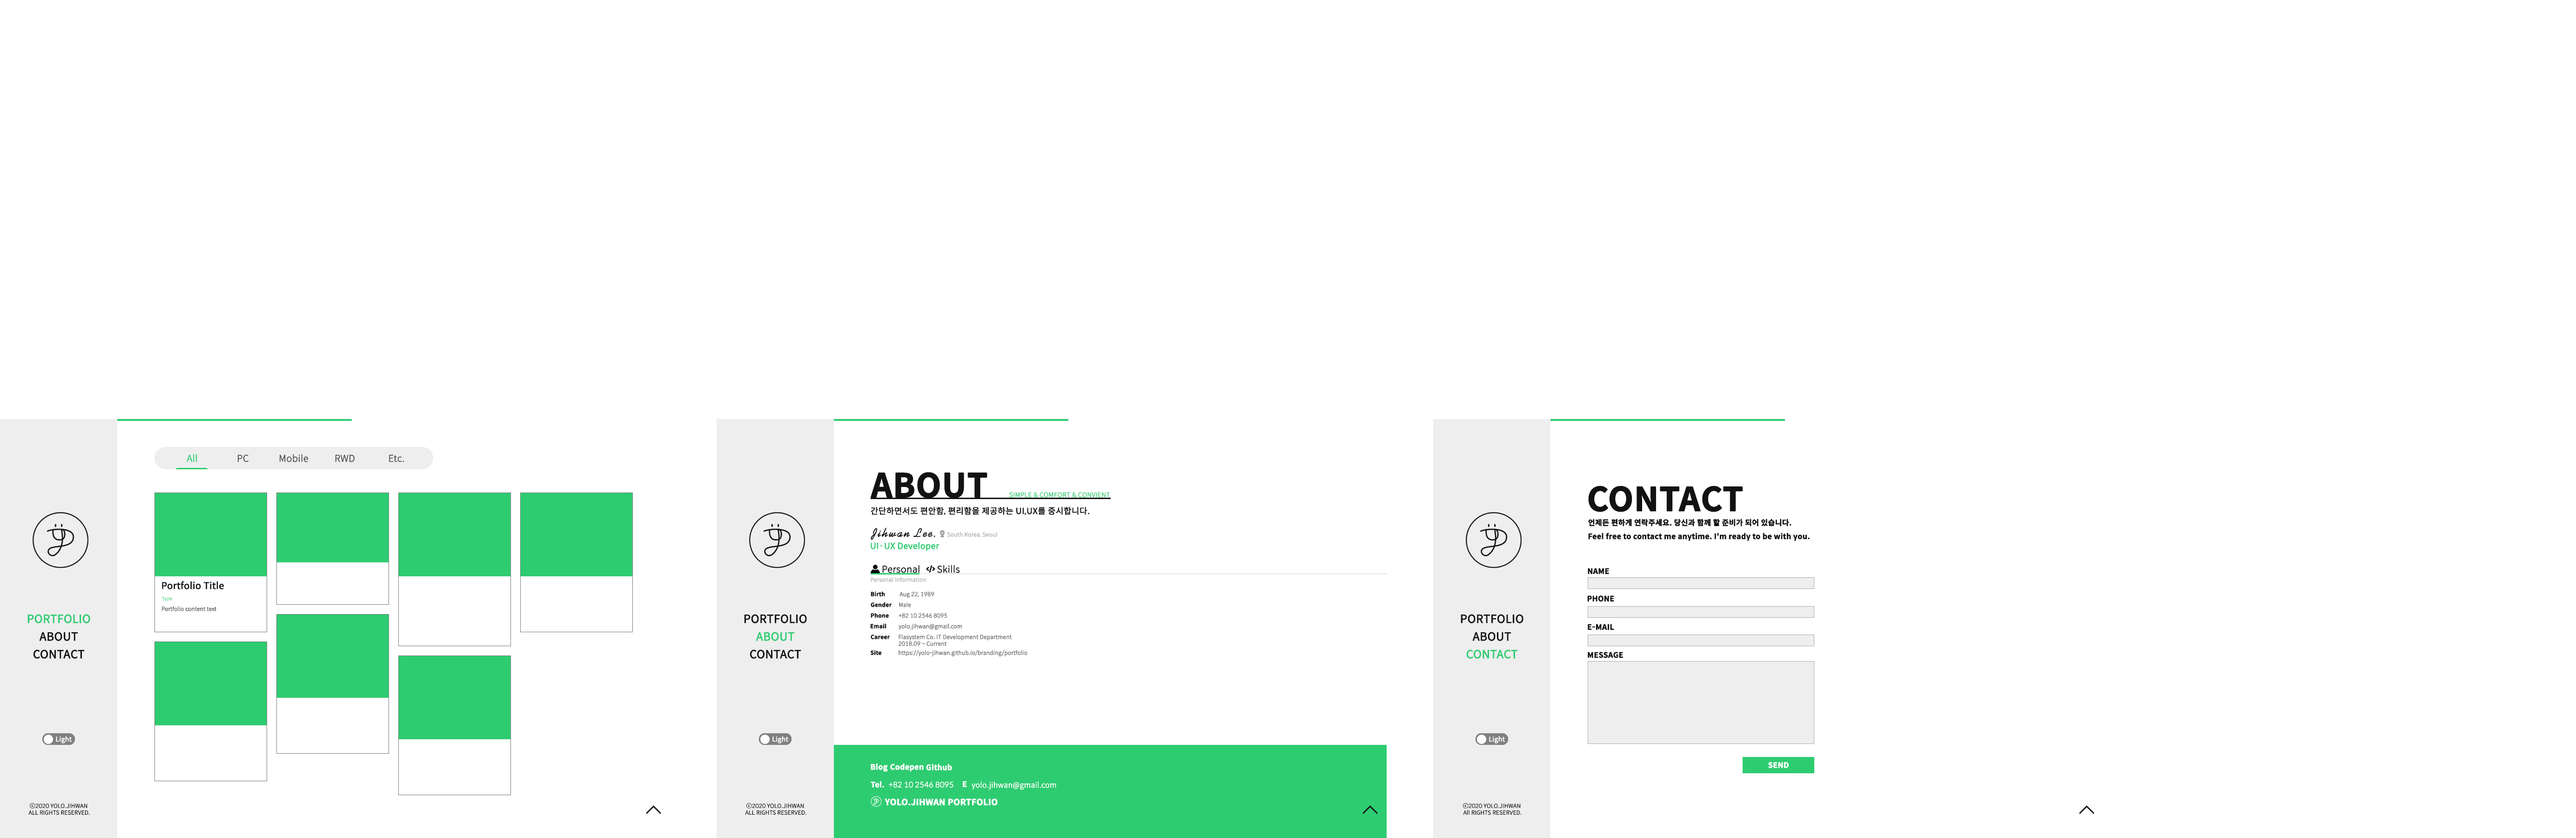
<style>
.page{position:relative;width:2576px;height:838px;background:#ffffff}
.page>*{position:absolute;margin:0}
.t1{font:9.3px "SpoqaHanSans-Light";color:#2ecc71;font-weight:bold}
.t2{font:9.3px "SpoqaHanSans-Light";color:#555555;font-weight:bold}
.t3{font:32.6px "SpoqaHanSans-Bold";color:#121214;font-weight:bold}
.t4{font:6.5px "SpoqaHanSans-Light";color:#2ecc71;font-weight:bold}
.t5{font:8.4px "SpoqaHanSans-Regular";color:#121214;font-weight:bold}
.t6{font:7.4px "SpoqaHanSans-Bold";color:#121214;font-weight:bold}
.t7{font:12.1px "TSTHlmL";color:#121214;font-weight:bold}
.t8{font:5.6px "SpoqaHanSans-Light";color:#aaaaaa;font-weight:bold}
.t9{font:8.4px "SpoqaHanSans-Regular";color:#2ecc71;font-weight:bold}
.t10{font:9.3px "SpoqaHanSans-Light";color:#121214;font-weight:bold}
.t11{font:9.3px "SpoqaHanSans-Regular";color:#121214;font-weight:bold}
.t12{font:5.6px "SpoqaHanSans-Bold";color:#121214;font-weight:bold}
.t13{font:5.6px "SpoqaHanSans-Light";color:#646464;font-weight:bold}
.t14{font:4.7px "SpoqaHanSans-Thin";color:#43cf7c;font-weight:bold}
.t15{font:5.6px "SpoqaHanSans-Thin";color:#121214;font-weight:bold}
.t16{font:11.2px "SpoqaHanSans-Regular";color:#2ecc71;font-weight:bold}
.t17{font:11.2px "SpoqaHanSans-Regular";color:#121214;font-weight:bold}
.t18{font:6.5px "SpoqaHanSans-Regular";color:#fefefe;font-weight:bold}
.t19{font:7.4px "SpoqaHanSans-Bold";color:#ffffff;font-weight:bold}
.t20{font:7.4px "SpoqaHanSans-Light";color:#ffffff;font-weight:bold}
.t21{font:5.6px "SpoqaHanSans-Light";color:#121214;font-weight:bold}
.t22{font:8.4px "SpoqaHanSans-Bold";color:#ffffff;font-weight:bold}
</style>
<div class="page">
<p class="t1" style="left:187px;top:454px;width:10px;height:8px">All</p>
<p class="t2" style="left:238px;top:454px;width:11px;height:8px">PC</p>
<p class="t2" style="left:280px;top:454px;width:29px;height:8px">Mobile</p>
<p class="t2" style="left:335px;top:454px;width:20px;height:8px">RWD</p>
<p class="t2" style="left:389px;top:454px;width:15px;height:8px">Etc.</p>
<p class="t3" style="left:871px;top:472px;width:116px;height:26px">ABOUT</p>
<p class="t3" style="left:1588px;top:485px;width:155px;height:27px">CONTACT</p>
<p class="t4" style="left:1009px;top:492px;width:101px;height:5px">SIMPLE &amp; COMFORT &amp; CONVIENT</p>
<p class="t5" style="left:871px;top:506px;width:218px;height:9px">간단하면서도 편안함, 편리함을 제공하는 UI,UX를 중시합니다.</p>
<p class="t6" style="left:1588px;top:518px;width:203px;height:8px">언제든 편하게 연락주세요. 당신과 함께 할 준비가 되어 있습니다.</p>
<p class="t7" style="left:871px;top:527px;width:64px;height:13px">Jihwan Lee.</p>
<p class="t8" style="left:947px;top:531px;width:50px;height:6px">South Korea, Seoul</p>
<p class="t6" style="left:1588px;top:532px;width:222px;height:9px">Feel free to contact me anytime. I'm ready to be with you.</p>
<p class="t9" style="left:871px;top:542px;width:68px;height:9px">UI·UX Developer</p>
<p class="t10" style="left:882px;top:564px;width:37px;height:9px">Personal</p>
<p class="t10" style="left:937px;top:564px;width:23px;height:9px">Skills</p>
<p class="t6" style="left:1588px;top:568px;width:21px;height:6px">NAME</p>
<p class="t11" style="left:162px;top:581px;width:62px;height:8px">Portfolio Title</p>
<p class="t8" style="left:871px;top:577px;width:55px;height:5px">Personal Information</p>
<p class="t12" style="left:871px;top:591px;width:14px;height:5px">Birth</p>
<p class="t13" style="left:899px;top:591px;width:35px;height:6px">Aug 22, 1989</p>
<p class="t14" style="left:162px;top:596px;width:10px;height:5px">Type</p>
<p class="t15" style="left:162px;top:606px;width:54px;height:5px">Portfolio content text</p>
<p class="t12" style="left:871px;top:602px;width:21px;height:5px">Gender</p>
<p class="t13" style="left:899px;top:602px;width:12px;height:5px">Male</p>
<p class="t6" style="left:1587px;top:595px;width:27px;height:7px">PHONE</p>
<p class="t16" style="left:27px;top:614px;width:63px;height:9px">PORTFOLIO</p>
<p class="t17" style="left:744px;top:614px;width:63px;height:9px">PORTFOLIO</p>
<p class="t12" style="left:871px;top:612px;width:18px;height:5px">Phone</p>
<p class="t13" style="left:899px;top:613px;width:48px;height:4px">+82 10 2546 8095</p>
<p class="t17" style="left:1461px;top:614px;width:62px;height:9px">PORTFOLIO</p>
<p class="t12" style="left:871px;top:623px;width:15px;height:5px">Email</p>
<p class="t13" style="left:899px;top:623px;width:63px;height:7px">yolo.jihwan@gmail.com</p>
<p class="t6" style="left:1588px;top:624px;width:26px;height:6px">E-MAIL</p>
<p class="t17" style="left:39px;top:631px;width:39px;height:10px">ABOUT</p>
<p class="t16" style="left:756px;top:631px;width:39px;height:10px">ABOUT</p>
<p class="t12" style="left:871px;top:634px;width:19px;height:5px">Career</p>
<p class="t13" style="left:899px;top:634px;width:113px;height:12px">Flasystem Co. IT Development Department<br>2018.09 ~ Current</p>
<p class="t17" style="left:1472px;top:631px;width:39px;height:10px">ABOUT</p>
<p class="t17" style="left:34px;top:649px;width:51px;height:9px">CONTACT</p>
<p class="t17" style="left:750px;top:649px;width:51px;height:9px">CONTACT</p>
<p class="t12" style="left:870px;top:650px;width:12px;height:5px">Site</p>
<p class="t13" style="left:899px;top:650px;width:128px;height:6px">https://yolo-jihwan.github.io/branding/portfolio</p>
<p class="t16" style="left:1467px;top:649px;width:51px;height:9px">CONTACT</p>
<p class="t6" style="left:1588px;top:651px;width:35px;height:7px">MESSAGE</p>
<p class="t18" style="left:56px;top:736px;width:16px;height:7px">Light</p>
<p class="t18" style="left:772px;top:736px;width:17px;height:7px">Light</p>
<p class="t18" style="left:1489px;top:736px;width:16px;height:7px">Light</p>
<p class="t19" style="left:1768px;top:761px;width:21px;height:7px">SEND</p>
<p class="t19" style="left:871px;top:763px;width:17px;height:8px">Blog</p>
<p class="t19" style="left:890px;top:763px;width:34px;height:8px">Codepen</p>
<p class="t19" style="left:926px;top:763px;width:26px;height:7px">Github</p>
<p class="t19" style="left:871px;top:781px;width:13px;height:6px">Tel.</p>
<p class="t20" style="left:889px;top:781px;width:64px;height:6px">+82 10 2546 8095</p>
<p class="t19" style="left:963px;top:781px;width:4px;height:6px">E</p>
<p class="t20" style="left:972px;top:781px;width:84px;height:9px">yolo.jihwan@gmail.com</p>
<p class="t21" style="left:28px;top:803px;width:62px;height:12px;text-align:center">ⓒ2020 YOLO.JIHWAN <br>ALL RIGHTS RESERVED.</p>
<p class="t21" style="left:745px;top:803px;width:61px;height:12px;text-align:center">ⓒ2020 YOLO.JIHWAN <br>ALL RIGHTS RESERVED.</p>
<p class="t22" style="left:885px;top:798px;width:113px;height:7px">YOLO.JIHWAN PORTFOLIO</p>
<p class="t21" style="left:1463px;top:803px;width:59px;height:12px;text-align:center">ⓒ2020 YOLO.JIHWAN <br>All RIGHTS RESERVED.</p>
</div>
